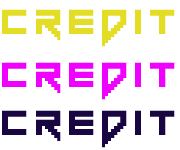
<style>
.page{position:relative;width:180px;height:150px;background:#ffffff}
.page>*{position:absolute;margin:0}
.t1{font:48.5px "Vermin-Vibes-1989";letter-spacing:0.12em;color:#e4dd26}
.t2{font:48.5px "Vermin-Vibes-1989";letter-spacing:0.12em;color:#f000ff}
.t3{font:48.5px "Vermin-Vibes-1989";letter-spacing:0.12em;color:#180542}
</style>
<div class="page">
<p class="t1" style="left:2px;top:9px;width:173px;height:38px">CREDIT</p>
<p class="t2" style="left:2px;top:62px;width:173px;height:38px">CREDIT</p>
<p class="t3" style="left:2px;top:110px;width:173px;height:38px">CREDIT</p>
</div>
